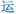
<style>
.page{position:relative;width:16px;height:14px;background:#ffffff}
.page>*{position:absolute;margin:0}
.t1{font:14px "SimSun";color:#0976a9}
</style>
<div class="page">
<p class="t1" style="left:1px;top:0px;width:14px;height:13px">运</p>
</div>
